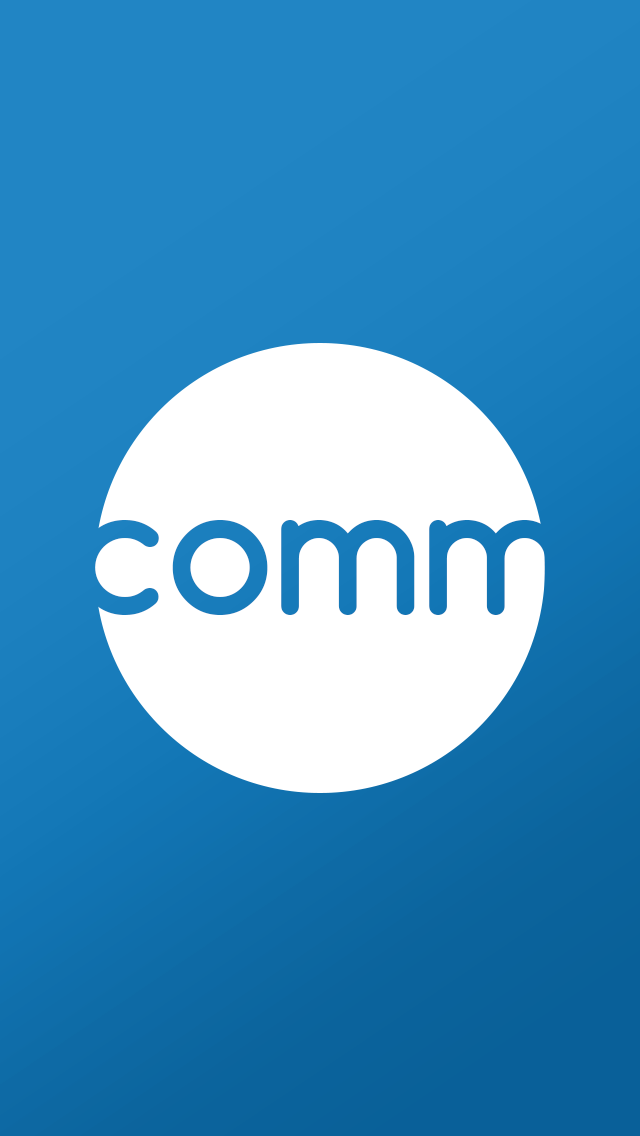
<style>
.page{position:relative;width:640px;height:1136px}
.page>*{position:absolute;margin:0}
.t1{font:173px "Comfortaa-Bold";color:#177bba}
</style>
<div class="page">
<p class="t1" style="left:77px;top:520px;width:486px;height:95px">comm</p>
</div>
